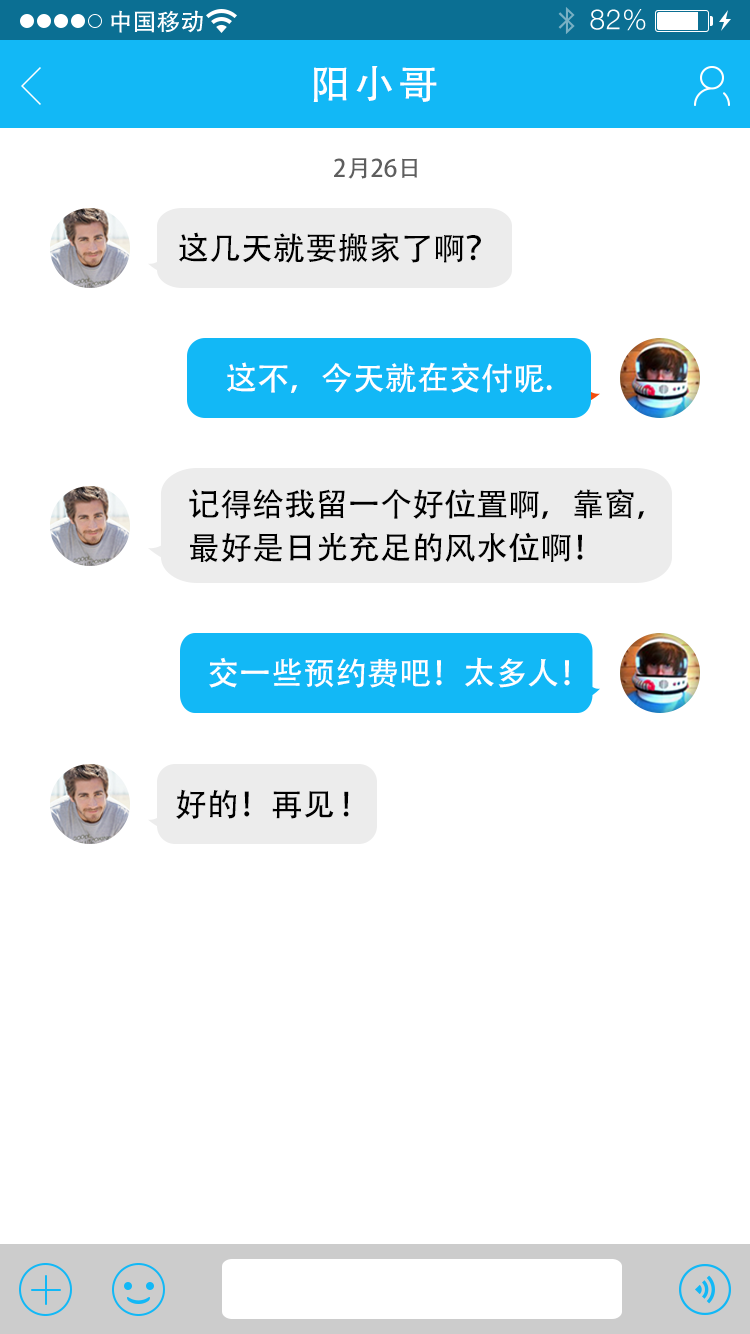
<style>
.page{position:relative;width:750px;height:1334px;background:#ffffff}
.page>*{position:absolute;margin:0}
.t1{font:40px "AdobeHeitiStd-Regular";letter-spacing:0.104em;color:#ffffff}
.t2{font:24px "AdobeHeitiStd-Regular";color:#5e5e5e}
.t3{font:32px "AdobeHeitiStd-Regular";color:#000000}
.t4{font:32px "AdobeHeitiStd-Regular";color:#ffffff}
.t5{font:32px/18px "AdobeHeitiStd-Regular";color:#000000}
</style>
<div class="page">
<p class="t1" style="left:313px;top:66px;width:124px;height:36px">阳小哥</p>
<p class="t2" style="left:334px;top:158px;width:83px;height:21px">2月26日</p>
<p class="t3" style="left:179px;top:232px;width:302px;height:31px">这几天就要搬家了啊？</p>
<p class="t4" style="left:227px;top:362px;width:325px;height:31px">这不，今天就在交付呢.</p>
<p class="t5" style="left:189px;top:489px;width:455px;height:74px">记得给我留一个好位置啊，靠窗，<br>最好是日光充足的风水位啊！</p>
<p class="t4" style="left:209px;top:657px;width:361px;height:31px">交一些预约费吧！太多人！</p>
<p class="t3" style="left:176px;top:789px;width:173px;height:30px">好的！再见 !</p>
</div>
